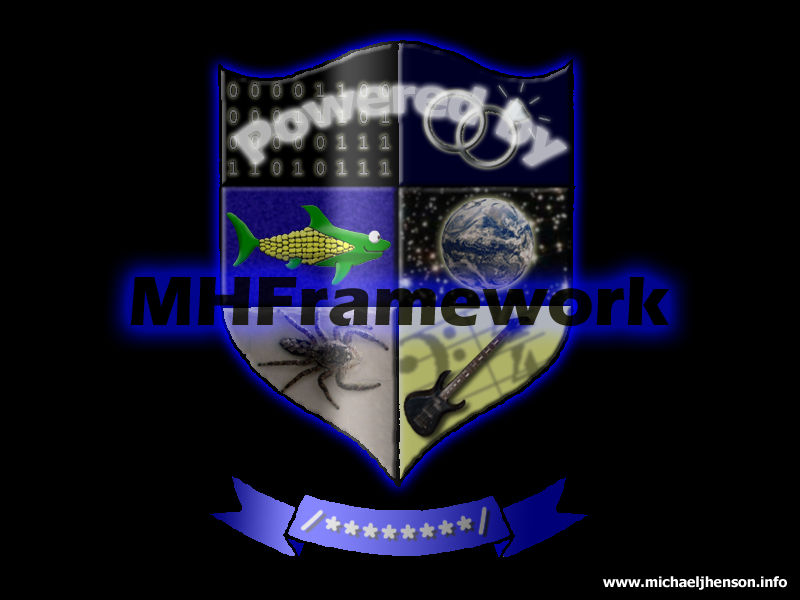
<style>
.page{position:relative;width:800px;height:600px;background:#000000}
.page>*{position:absolute;margin:0}
.t1{font:48px "Tahoma-Bold";color:#bababe}
.t2{font:72px "ErasITC-Bold";color:#000000}
.t3{font:14px "Tahoma-Bold";color:#ffffff}
</style>
<div class="page">
<p class="t1" style="left:233px;top:86px;width:334px;height:80px">Powered by</p>
<p class="t2" style="left:130px;top:277px;width:540px;height:49px;opacity:0.75">MHFramework</p>
<p class="t3" style="left:603px;top:576px;width:184px;height:14px">www.michaeljhenson.info</p>
</div>
